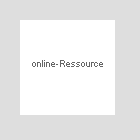
<style>
.page{position:relative;width:140px;height:140px;background:#dedede}
.page>*{position:absolute;margin:0}
.t1{font:9px "ArialMT";color:#666666}
</style>
<div class="page">
<p class="t1" style="left:32px;top:60px;width:71px;height:7px">online-Ressource</p>
</div>
